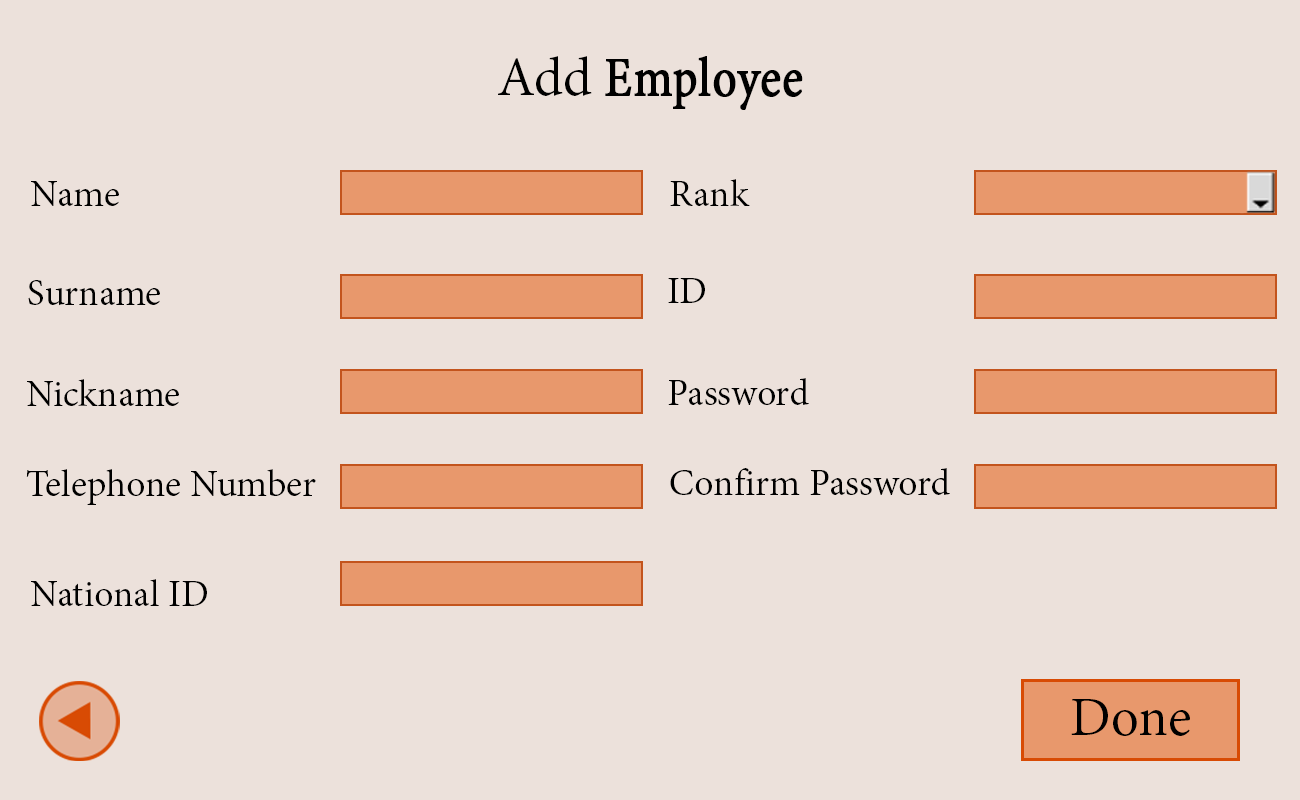
<style>
.page{position:relative;width:1300px;height:800px;background:#ece1db}
.page>*{position:absolute;margin:0}
.t1{font:75px "AdobeThai-Regular";letter-spacing:0.005em;color:#000000;font-weight:bold;scale:0.86 1}
.t2{font:66.7px "AdobeThai-Regular";color:#000000}
.t3{font:66.7px "AdobeThai-Regular";letter-spacing:0.005em;color:#000000;font-weight:bold;scale:0.86 1}
.t4{font:45.8px "AdobeThai-Regular";color:#000000}
</style>
<div class="page">
<p class="t1" style="left:498px;top:56px;width:305px;height:54px"><span class="t2">Add </span><span class="t3">Employee </span>Information</p>
<p class="t4" style="left:31px;top:181px;width:88px;height:25px">Name</p>
<p class="t4" style="left:670px;top:179px;width:80px;height:27px">Rank</p>
<p class="t4" style="left:28px;top:280px;width:132px;height:26px">Surname</p>
<p class="t4" style="left:668px;top:278px;width:37px;height:25px">ID</p>
<p class="t4" style="left:27px;top:379px;width:152px;height:27px">Nickname</p>
<p class="t4" style="left:668px;top:378px;width:141px;height:27px">Password</p>
<p class="t4" style="left:26px;top:469px;width:290px;height:36px">Telephone Number</p>
<p class="t4" style="left:670px;top:468px;width:280px;height:27px">Confirm Password</p>
<p class="t4" style="left:31px;top:579px;width:176px;height:27px">National ID</p>
<p class="t2" style="left:1071px;top:699px;width:119px;height:37px">Done</p>
</div>
